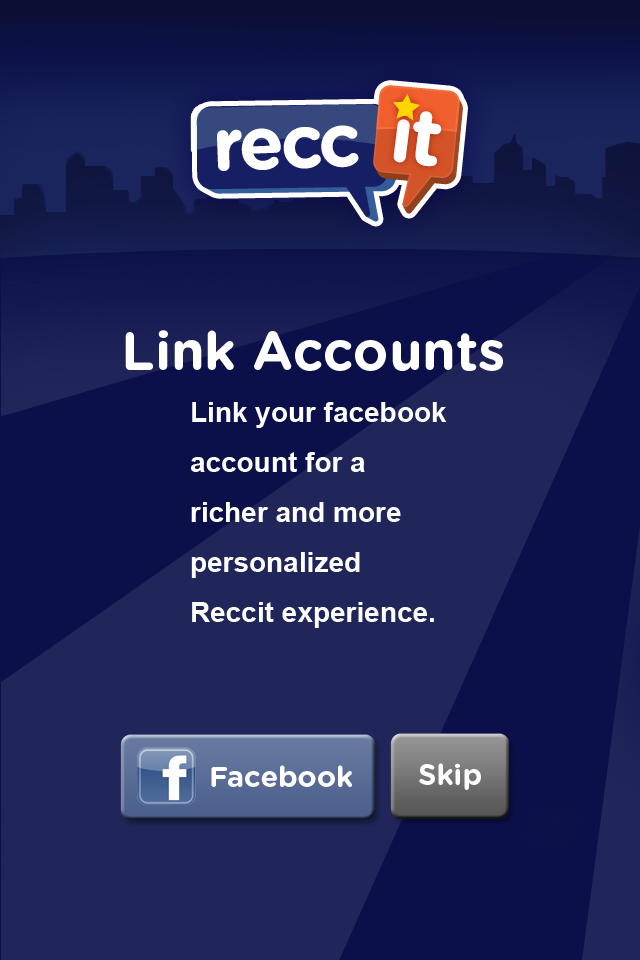
<style>
.page{position:relative;width:640px;height:960px;background:#21265a}
.page>*{position:absolute;margin:0}
.t1{font:53.8px "GothamRounded-Bold";color:#ffffff}
.t2{font:28px/50px "Arial-BoldMT";color:#ffffff}
.t3{font:29px "GothamRounded-Bold";color:#ffffff}
</style>
<div class="page">
<p class="t1" style="left:125px;top:330px;width:378px;height:41px">Link Accounts</p>
<p class="t2" style="left:191px;top:402px;width:256px;height:226px">Link your facebook<br>account for a <br>richer and more <br>personalized <br>Reccit experience.</p>
<p class="t3" style="left:211px;top:765px;width:141px;height:22px">Facebook</p>
<p class="t3" style="left:419px;top:763px;width:62px;height:27px">Skip</p>
</div>
